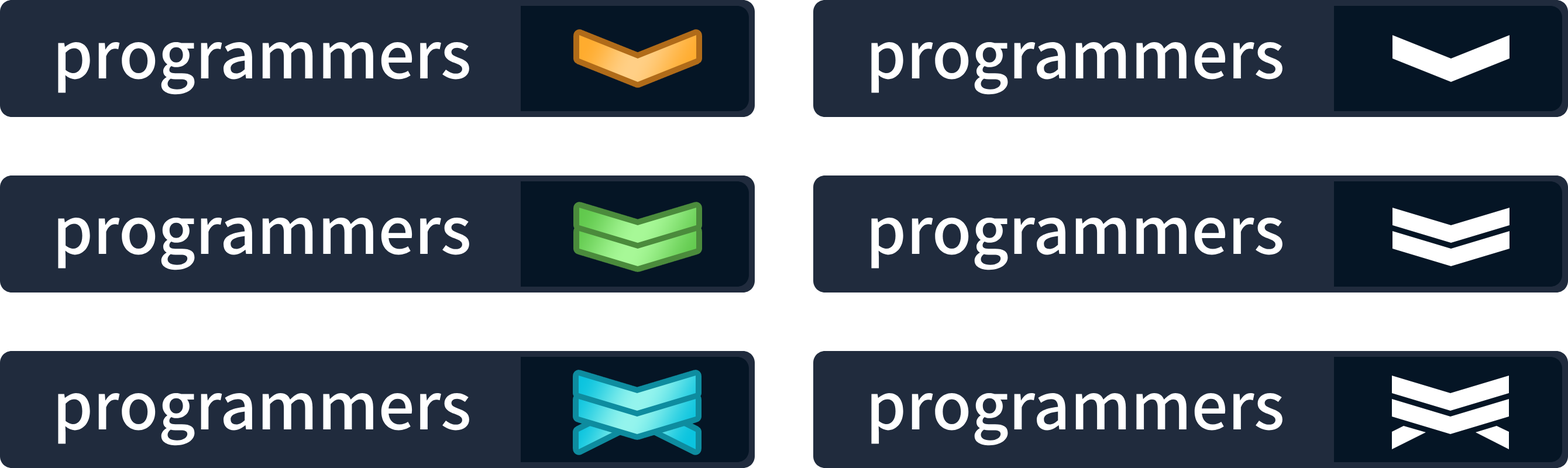
<style>
.page{position:relative;width:1568px;height:468px;background:#202b3d}
.page>*{position:absolute;margin:0}
.t1{font:64.4px "NotoSansKR-Medium";color:#ffffff}
</style>
<div class="page">
<p class="t1" style="left:871px;top:42px;width:411px;height:53px">programmers</p>
<p class="t1" style="left:58px;top:42px;width:411px;height:53px">programmers</p>
<p class="t1" style="left:58px;top:217px;width:411px;height:53px">programmers</p>
<p class="t1" style="left:871px;top:217px;width:411px;height:53px">programmers</p>
<p class="t1" style="left:58px;top:393px;width:411px;height:53px">programmers</p>
<p class="t1" style="left:871px;top:393px;width:411px;height:53px">programmers</p>
</div>
